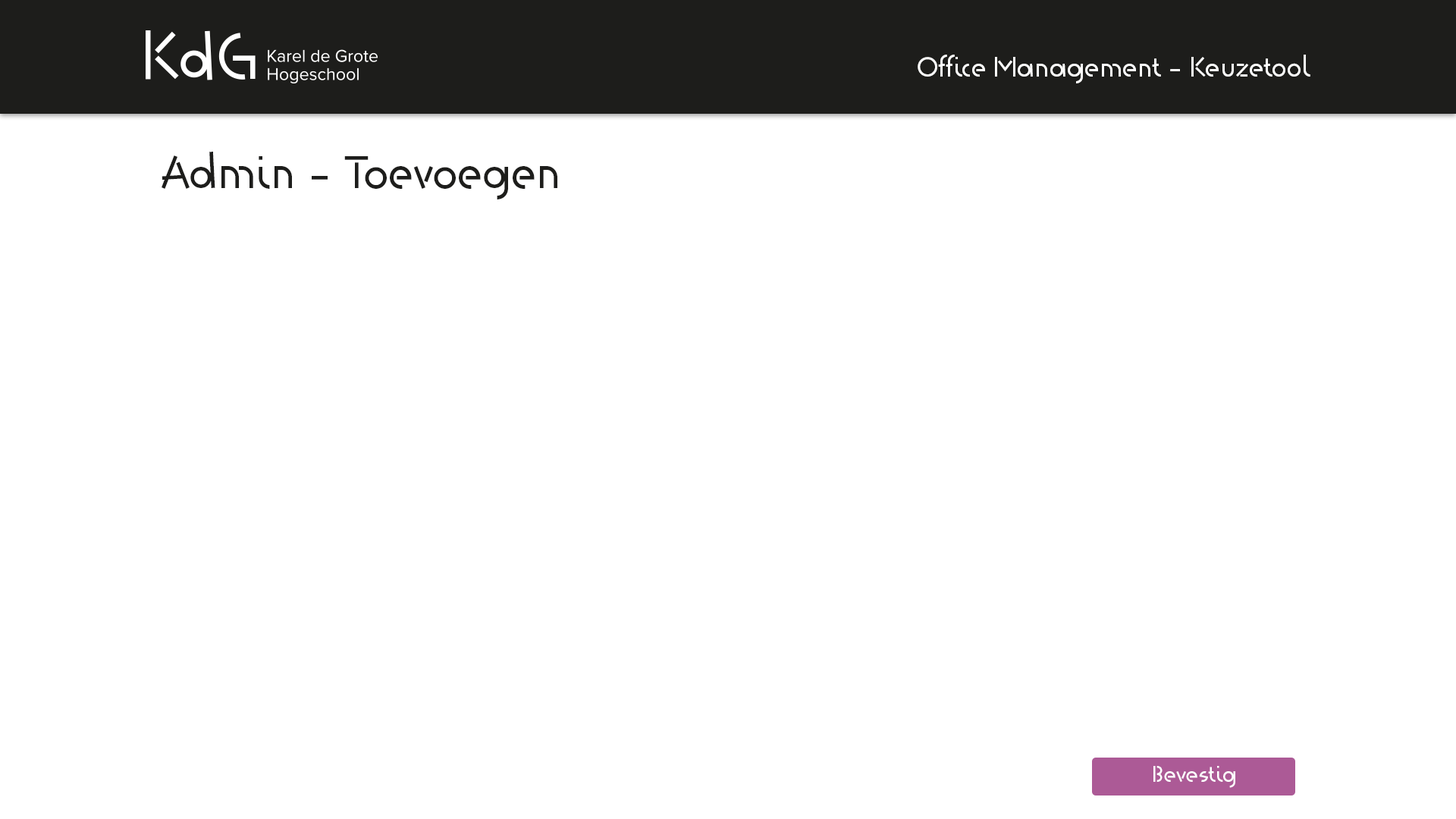
<style>
.page{position:relative;width:1456px;height:819px;background:#ffffff}
.page>*{position:absolute;margin:0}
.t1{font:27.3px "KdG-Regular";color:#fefefe}
.t2{font:45.5px "KdG-Regular";color:#1d1d1b}
.t3{font:22.7px "KdG-Regular";color:#fefefe}
</style>
<div class="page">
<p class="t1" style="left:918px;top:55px;width:392px;height:28px">Office Management - Keuzetool</p>
<p class="t2" style="left:162px;top:152px;width:395px;height:47px">Admin - Toevoegen</p>
<p class="t3" style="left:1153px;top:766px;width:82px;height:22px">Bevestig</p>
</div>
